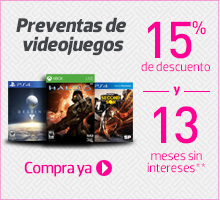
<style>
.page{position:relative;width:220px;height:200px}
.page>*{position:absolute;margin:0}
.t1{font:20.4px/19.2px "Dobra-Bold";letter-spacing:-0.025em;color:#414448;font-style:italic}
.t2{font:50.8px "DINPro-Medium";letter-spacing:-0.05em;color:#ff0095}
.t3{font:30.7px "DINPro-Medium";letter-spacing:-0.05em;color:#ff0095}
.t4{font:13.1px "Dobra-Book";letter-spacing:-0.025em;color:#ff0095}
.t5{font:13.1px "Dobra-Bold";letter-spacing:-0.025em;color:#ff0095}
.t6{font:13.1px/11.6px "Dobra-Book";letter-spacing:-0.025em;color:#ff0095}
.t7{font:16px "Dobra-Book";letter-spacing:-0.05em;color:#ff0096;font-weight:bold}
</style>
<div class="page">
<p class="t1" style="left:16px;top:17px;width:110px;height:39px;text-align:center">Preventas de <br>videojuegos</p>
<p class="t2" style="left:148px;top:21px;width:58px;height:38px">15<span class="t3">%</span></p>
<p class="t4" style="left:141px;top:61px;width:69px;height:11px">de descuento</p>
<p class="t5" style="left:173px;top:86px;width:8px;height:10px">y</p>
<p class="t2" style="left:154px;top:106px;width:44px;height:38px">13</p>
<p class="t6" style="left:147px;top:150px;width:58px;height:23px;text-align:center">meses sin<br>intereses**</p>
<p class="t7" style="left:24px;top:161px;width:68px;height:16px">Compra ya</p>
</div>
